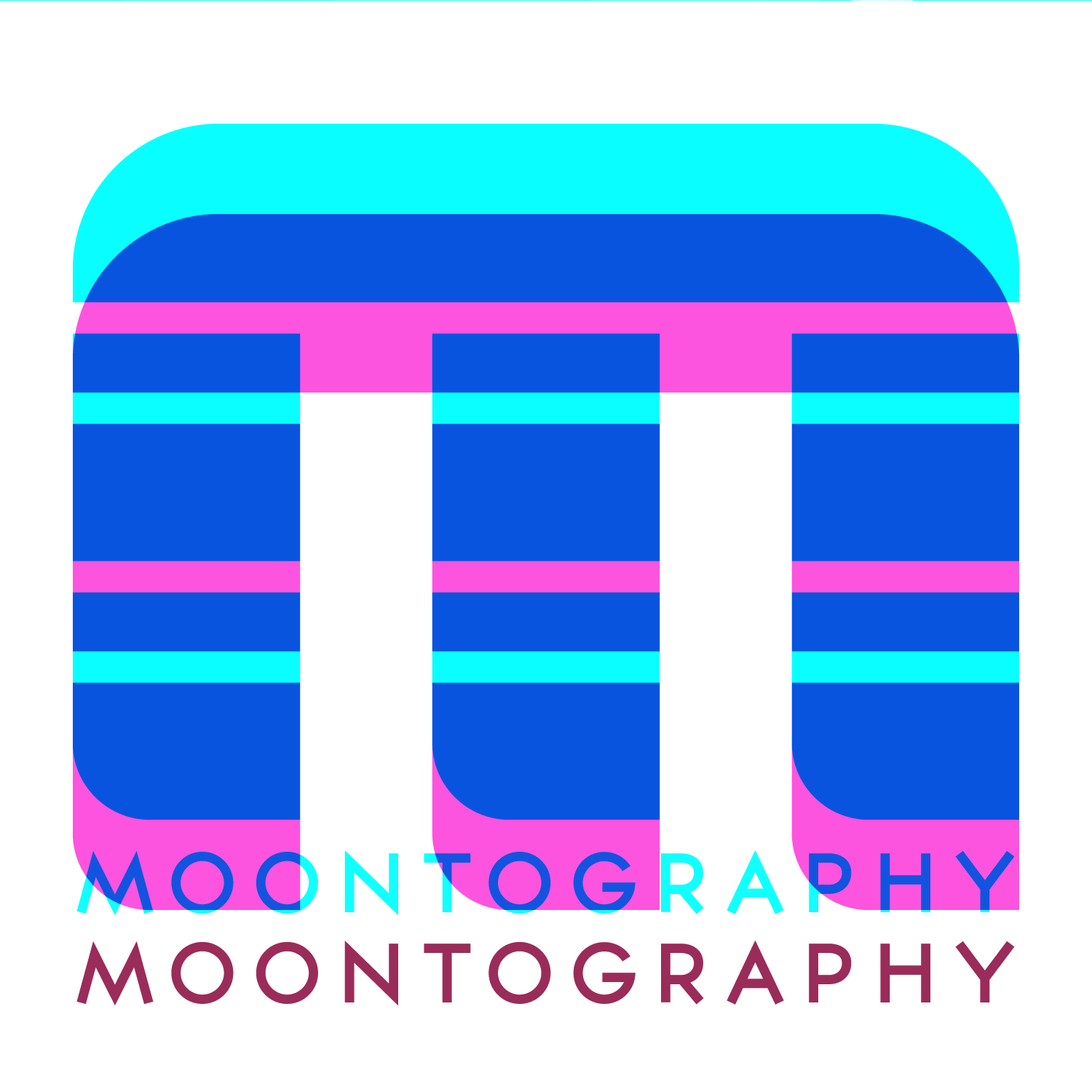
<style>
.page{position:relative;width:1092px;height:1092px;background:#ffffff}
.page>*{position:absolute;margin:0}
.t1{font:75.8px "TYPOGRAPHPRO-SemiBold";letter-spacing:0.2em}
</style>
<div class="page">
<p class="t1" style="left:76px;top:850px;width:939px;height:65px">MOONTOGRAPHY</p>
</div>
